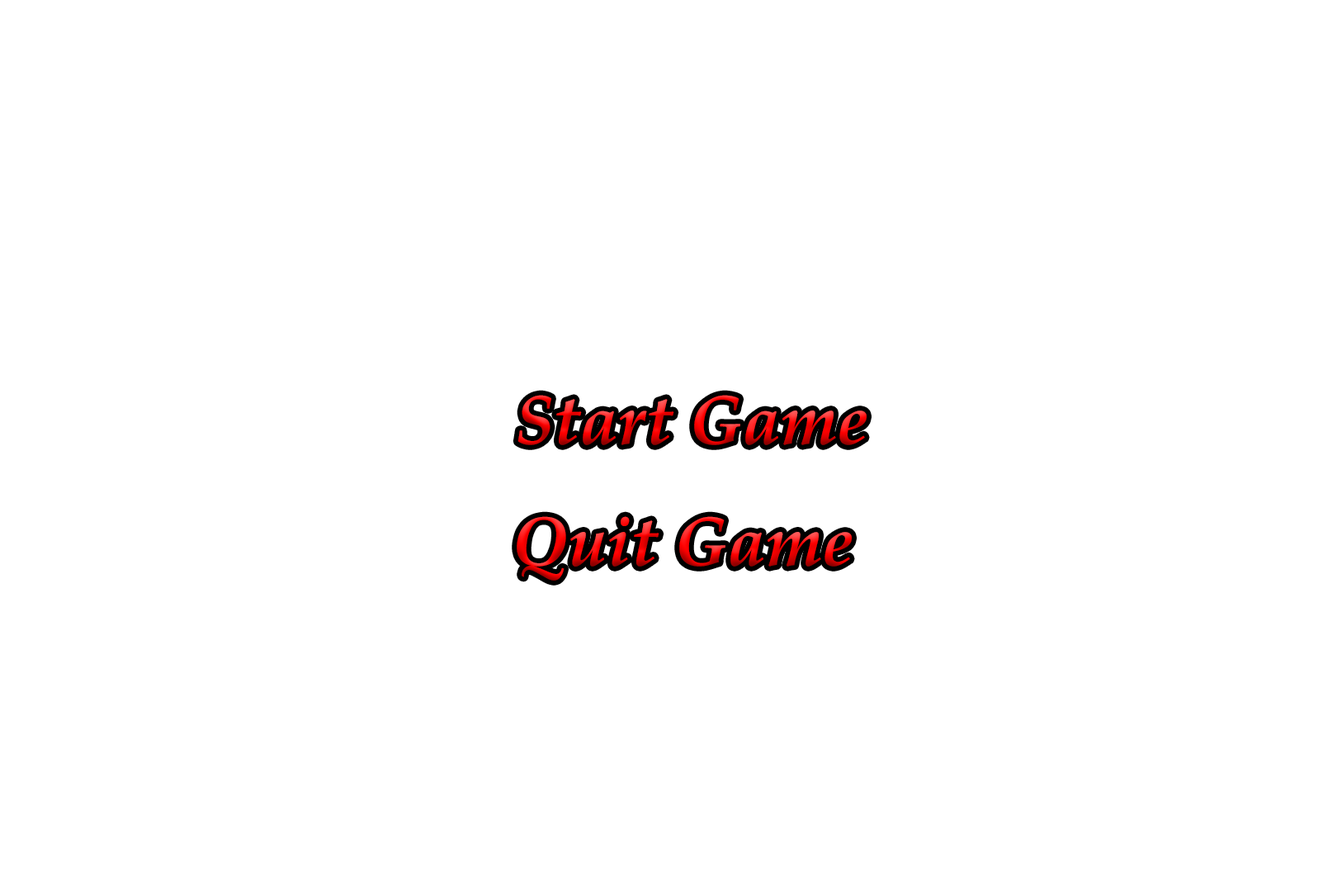
<style>
.page{position:relative;width:1337px;height:892px;background:#ffffff}
.page>*{position:absolute;margin:0}
.t1{font:68.8px "PalatinoLinotype-BoldItalic"}
</style>
<div class="page">
<p class="t1" style="left:518px;top:395px;width:349px;height:50px">Start Game</p>
<p class="t1" style="left:517px;top:516px;width:335px;height:64px">Quit Game</p>
</div>
